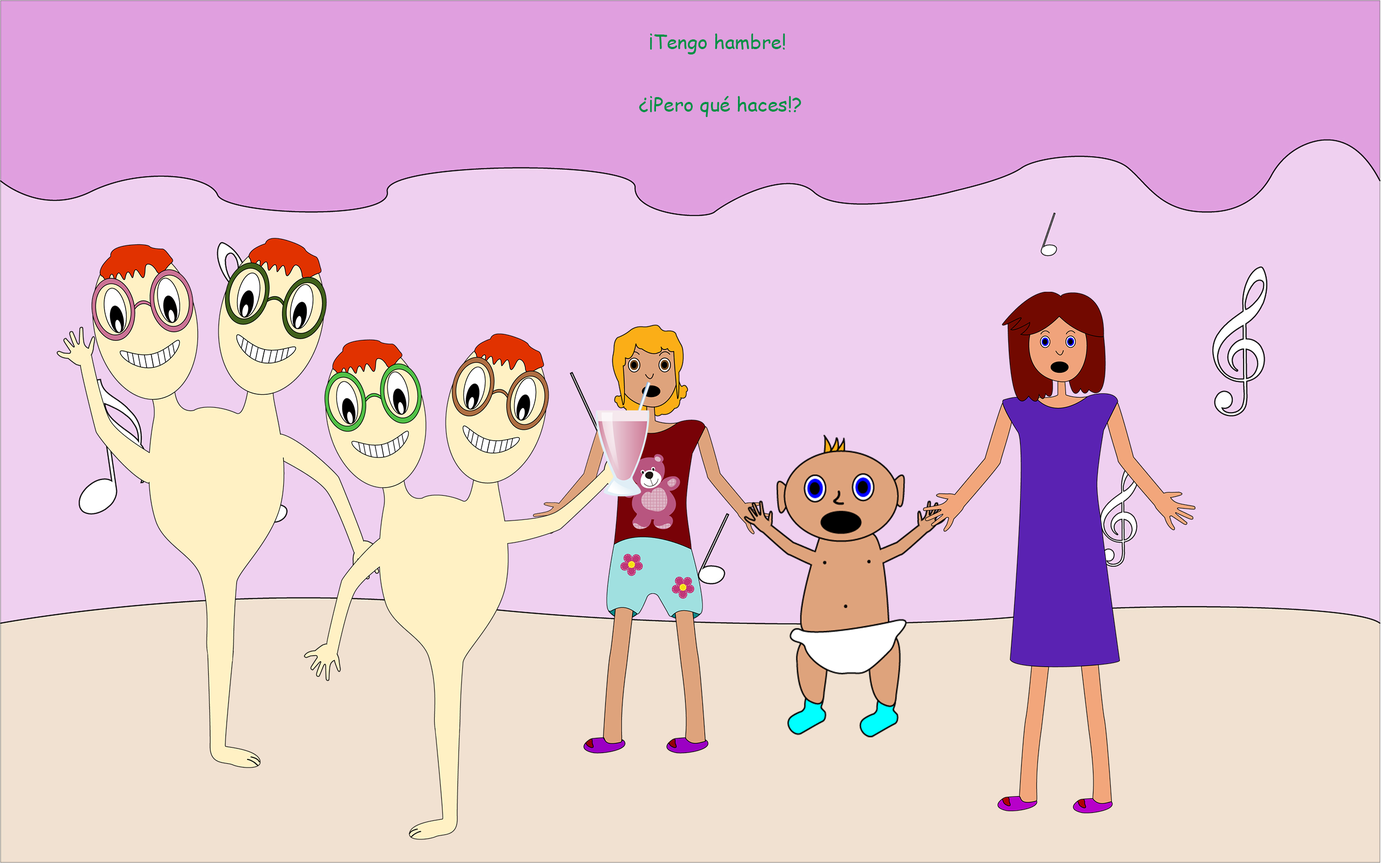
<style>
.page{position:relative;width:1381px;height:863px;background:#efd0f0}
.page>*{position:absolute;margin:0}
.t1{font:19.4px "ComicSansMS";color:#009045}
</style>
<div class="page">
<p class="t1" style="left:650px;top:33px;width:135px;height:21px">¡Tengo hambre!</p>
<p class="t1" style="left:639px;top:96px;width:162px;height:21px">¿¡Pero qué haces!?</p>
</div>
